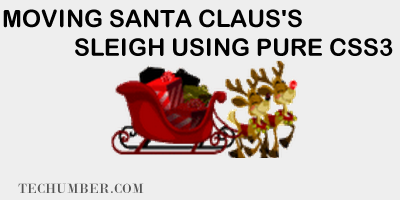
<style>
.page{position:relative;width:400px;height:200px;background:#eeeeee}
.page>*{position:absolute;margin:0}
.t1{font:24px "ArialRoundedMTBold";color:#010101;text-transform:uppercase}
.t2{font:14px "BodoniMT";color:#555555;text-transform:uppercase}
</style>
<div class="page">
<p class="t1" style="left:3px;top:9px;width:390px;height:47px">Moving Santa Claus's <br>            Sleigh Using Pure CSS3</p>
<p class="t2" style="left:18px;top:183px;width:126px;height:10px">techumber.com</p>
</div>
